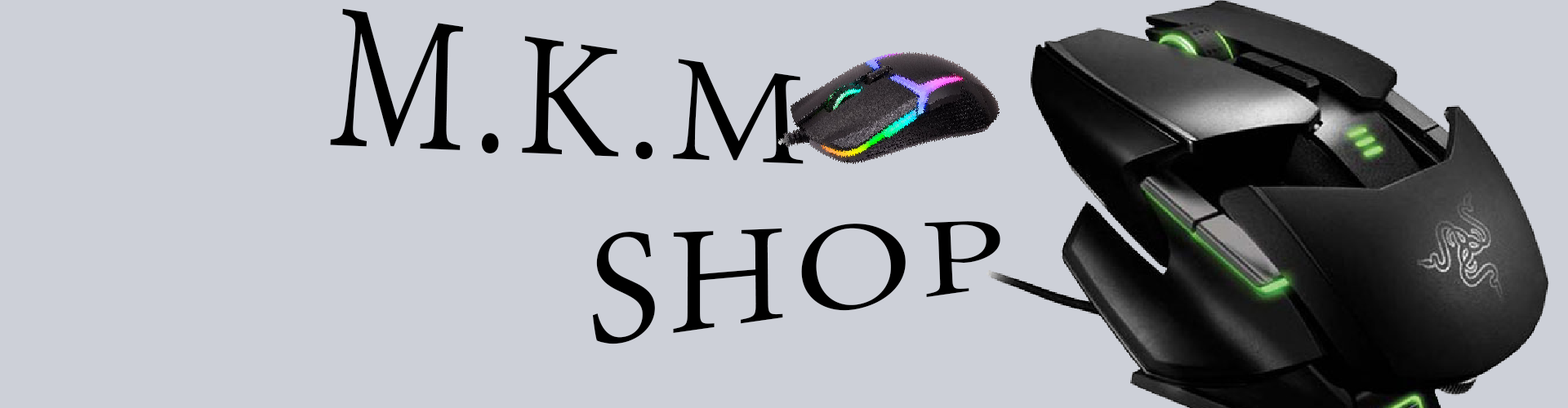
<style>
.page{position:relative;width:1568px;height:408px;background:#cdd0d8}
.page>*{position:absolute;margin:0}
.t1{font:190.3px/175.6px "AdobeThai-Regular";letter-spacing:0.04em;color:#000000}
</style>
<div class="page">
<p class="t1" style="left:330px;top:8px;width:670px;height:337px">M.K.M <br>         SHOP</p>
</div>
